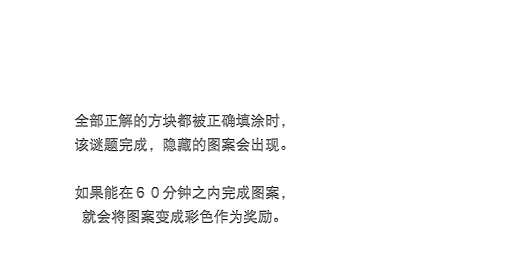
<style>
.page{position:relative;width:512px;height:256px;background:#ffffff}
.page>*{position:absolute;margin:0}
.t1{font:14.7px/24px "DFPHeiW5-GB"}
</style>
<div class="page">
<p class="t1" style="left:75px;top:113px;width:211px;height:111px;text-align:center">全部正解的方块都被正确填涂时，<br>该谜题完成，隐藏的图案会出现。<br><br>如果能在６０分钟之内完成图案，<br>就会将图案变成彩色作为奖励。</p>
</div>
